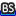
<style>
.page{position:relative;width:16px;height:16px;background:#242525}
.page>*{position:absolute;margin:0}
.t1{font:12px "Calibri-Light";color:#ffffff}
</style>
<div class="page">
<p class="t1" style="left:2px;top:4px;width:12px;height:9px">BS</p>
</div>
